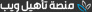
<style>
.page{position:relative;width:92px;height:12px;background:#333333}
.page>*{position:absolute;margin:0}
.t1{font:13px "STV";color:#fefefe}
</style>
<div class="page">
<p class="t1" style="left:0px;top:0px;width:74px;height:12px">منصة تأهيل ويب</p>
</div>
